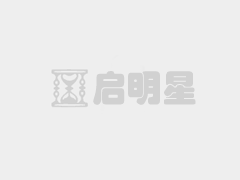
<style>
.page{position:relative;width:240px;height:180px;background:#eeeeee}
.page>*{position:absolute;margin:0}
.t1{font:35.7px "STHupo";letter-spacing:0.025em;color:#d1d1d1}
</style>
<div class="page">
<p class="t1" style="left:93px;top:71px;width:103px;height:34px">启明星</p>
</div>
